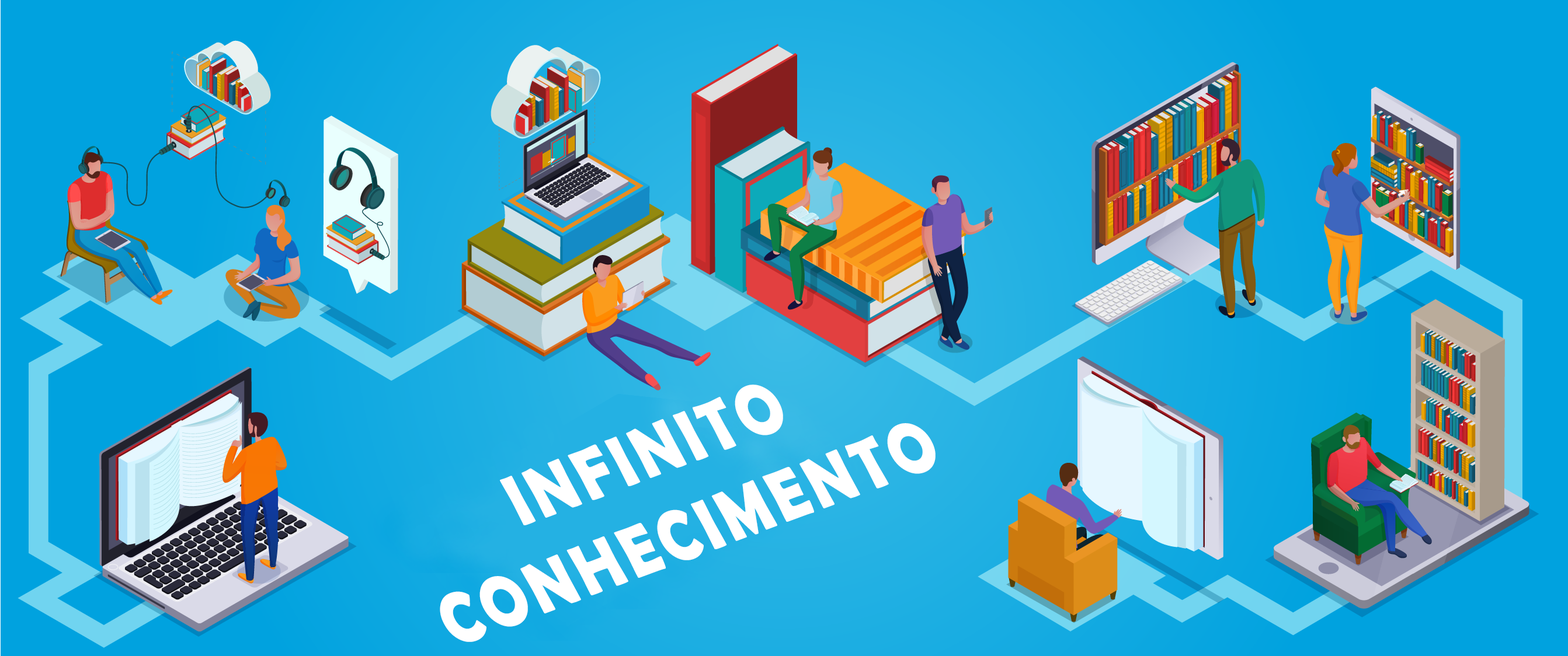
<style>
.page{position:relative;width:1568px;height:656px}
.page>*{position:absolute;margin:0}
.t1{font:75.2px "BerlinSansFBDemi-Bold";letter-spacing:0.075em;color:#ffffff;text-transform:uppercase;scale:0.81 1}
</style>
<div class="page">
<p class="t1" style="left:440px;top:385px;width:496px;height:257px;text-align:center;rotate:-21deg">Infinito<br>conhecimento</p>
</div>
